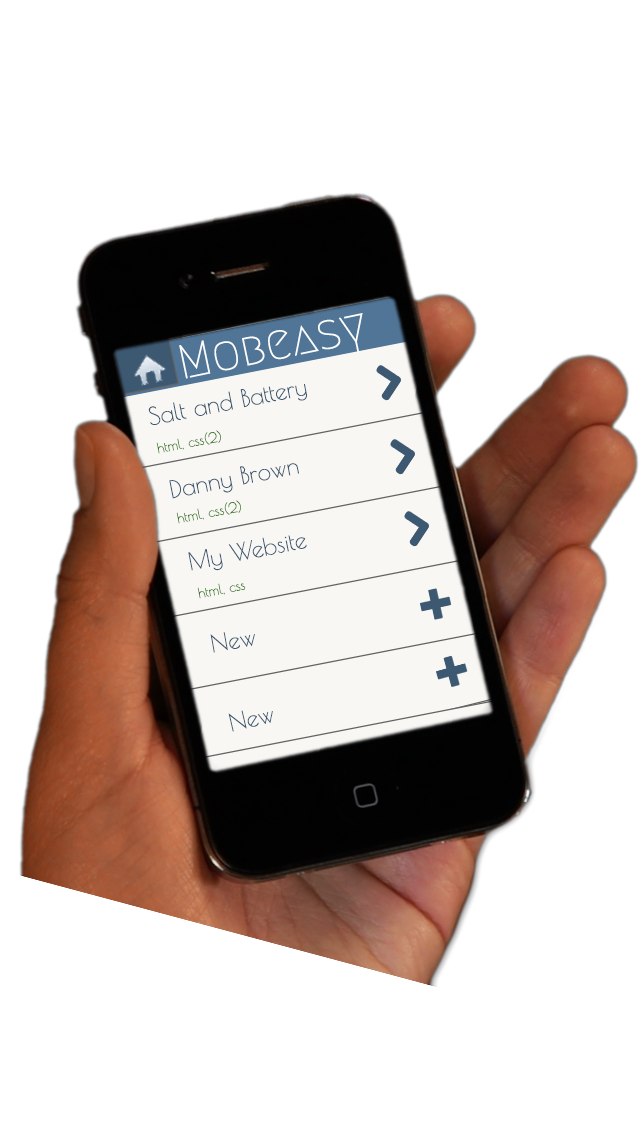
<style>
.page{position:relative;width:640px;height:1136px;background:#ffffff}
.page>*{position:absolute;margin:0}
.t1{font:48px "Megrim";color:#fbfcfc}
.t2{font:24px "PoiretOne-Regular";color:#3d5871}
.t3{font:14px "PoiretOne-Regular";color:#2a700e}
</style>
<div class="page">
<p class="t1" style="left:179px;top:313px;width:184px;height:66px;rotate:-12deg">Mobeasy</p>
<p class="t2" style="left:148px;top:384px;width:159px;height:41px;rotate:-11deg">Salt and Battery</p>
<p class="t3" style="left:156px;top:430px;width:65px;height:24px;rotate:-11deg">html, css(2)</p>
<p class="t2" style="left:169px;top:463px;width:130px;height:36px;rotate:-11deg">Danny Brown</p>
<p class="t3" style="left:176px;top:500px;width:65px;height:24px;rotate:-11deg">html, css(2)</p>
<p class="t2" style="left:188px;top:535px;width:119px;height:36px;rotate:-11deg">My Website</p>
<p class="t3" style="left:197px;top:583px;width:49px;height:16px;rotate:-11deg">html, css</p>
<p class="t2" style="left:210px;top:632px;width:45px;height:21px;rotate:-10deg">New</p>
<p class="t2" style="left:228px;top:710px;width:45px;height:22px;rotate:-13deg">New</p>
</div>
